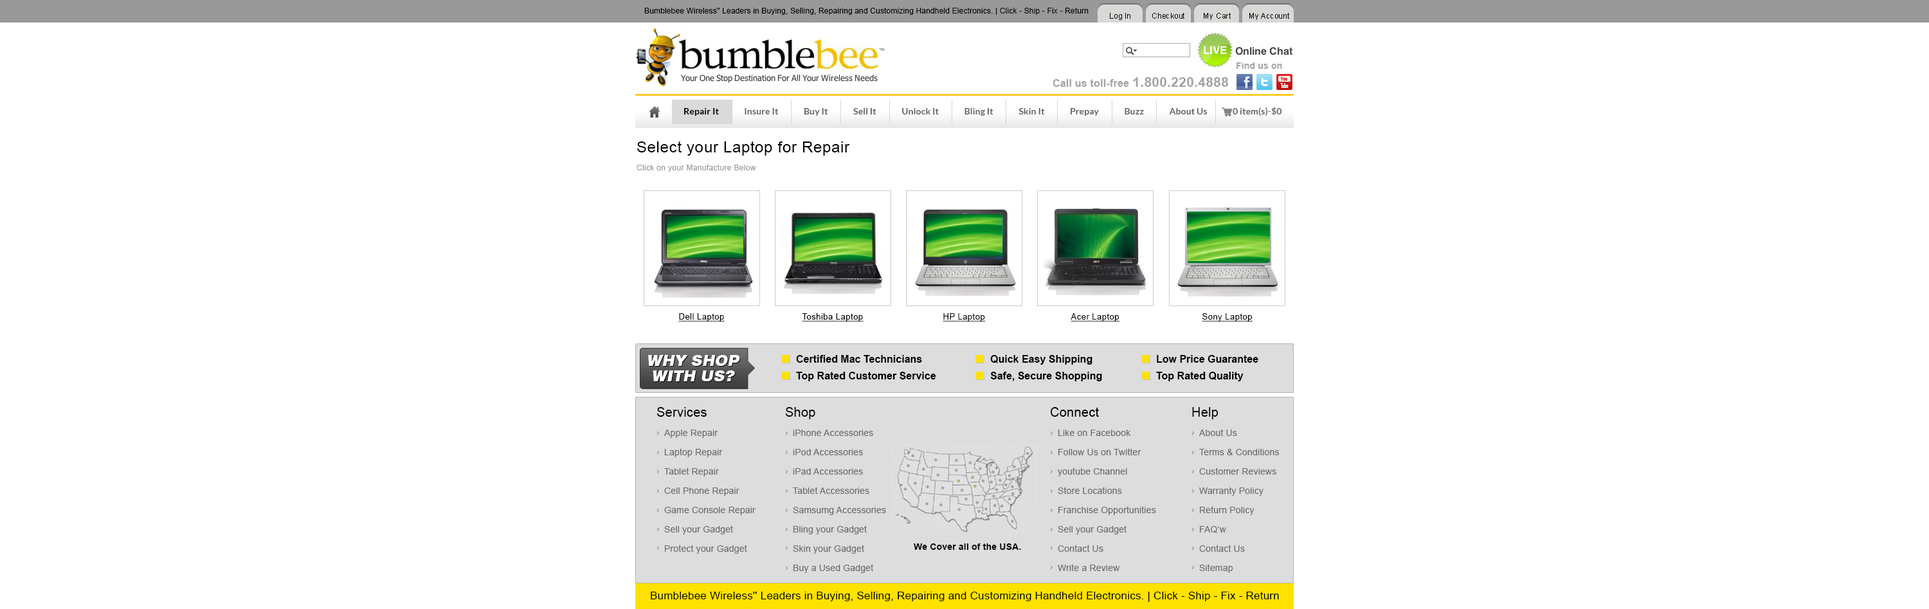
<style>
.page{position:relative;width:1929px;height:609px;background:#ffffff}
.page>*{position:absolute;margin:0}
.t1{font:7.7px "ArialMT";letter-spacing:0.013em;color:#000000}
.t2{font:9px "Arial-BoldMT";letter-spacing:0.013em;color:#a3a3a3}
.t3{font:10.3px "Arial-BoldMT";letter-spacing:0.013em;color:#a3a3a3}
.t4{font:13.5px "Arial-BoldMT";letter-spacing:0.013em;color:#a3a3a3}
.t5{font:9px "Lato-Bold";letter-spacing:0.008em;color:#666666}
.t6{font:9px "Lato-Bold";letter-spacing:0.008em;color:#000000}
.t7{font:15.4px "ArialMT";letter-spacing:0.028em;color:#000000}
.t8{font:7.7px "ArialMT";letter-spacing:0.028em;color:#999999}
.t9{font:8.4px "ArialMT";letter-spacing:0.038em;color:#000000;text-decoration:underline}
.t10{font:8.4px "ArialMT";letter-spacing:0.038em;color:#010101;text-decoration:underline}
.t11{font:15.4px/15.4px "Swiss721BT-Black";color:#ffffff;font-style:italic}
.t12{font:10.3px/16.7px "Arial-BoldMT";color:#000000}
.t13{font:12.9px "ArialMT";letter-spacing:0.013em;color:#000000}
.t14{font:9px/19.3px "ArialMT";letter-spacing:0.013em;color:#6b6b6b}
.t15{font:9px "Arial-BoldMT";letter-spacing:0.013em;color:#000000}
.t16{font:10.9px "ArialMT";letter-spacing:0.013em;color:#000000}
</style>
<div class="page">
<p class="t1" style="left:644px;top:8px;width:444px;height:7px">Bumblebee Wireless'' Leaders in Buying, Selling, Repairing and Customizing Handheld Electronics. | Click - Ship - Fix - Return</p>
<p class="t1" style="left:1110px;top:13px;width:20px;height:7px">Log In</p>
<p class="t1" style="left:1152px;top:13px;width:32px;height:6px">Checkout</p>
<p class="t1" style="left:1203px;top:13px;width:27px;height:7px">My Cart</p>
<p class="t1" style="left:1249px;top:13px;width:40px;height:7px">My Account</p>
<p class="t2" style="left:1236px;top:62px;width:46px;height:7px">Find us on</p>
<p class="t3" style="left:1052px;top:77px;width:176px;height:10px">Call us toll-free <span class="t4">1.800.220.4888</span></p>
<p class="t5" style="left:684px;top:107px;width:598px;height:9px"><span class="t6">Repair It </span>             Insure It              Buy It              Sell It              Unlock It              Bling It              Skin It              Prepay              Buzz              About Us              0 item(s)-$0</p>
<p class="t7" style="left:637px;top:141px;width:213px;height:15px">Select your Laptop for Repair</p>
<p class="t8" style="left:636px;top:165px;width:120px;height:7px">Click on your Manufacture Below</p>
<p class="t9" style="left:678px;top:313px;width:46px;height:8px">Dell Laptop</p>
<p class="t9" style="left:802px;top:313px;width:61px;height:8px">Toshiba Laptop</p>
<p class="t9" style="left:942px;top:313px;width:44px;height:8px">HP Laptop</p>
<p class="t10" style="left:1070px;top:313px;width:50px;height:8px">Acer Laptop</p>
<p class="t9" style="left:1202px;top:313px;width:50px;height:8px">Sony Laptop</p>
<p class="t11" style="left:648px;top:355px;width:92px;height:26px;text-align:center">WHY SHOP<br>WITH US?</p>
<p class="t12" style="left:796px;top:355px;width:140px;height:26px">Certified Mac Technicians   <br>Top Rated Customer Service</p>
<p class="t12" style="left:990px;top:355px;width:112px;height:26px">Quick Easy Shipping    <br>Safe, Secure Shopping</p>
<p class="t12" style="left:1156px;top:355px;width:102px;height:26px">Low Price Guarantee    <br>Top Rated Quality</p>
<p class="t13" style="left:656px;top:407px;width:50px;height:10px">Services</p>
<p class="t13" style="left:785px;top:407px;width:30px;height:12px">Shop</p>
<p class="t13" style="left:1050px;top:407px;width:49px;height:10px">Connect</p>
<p class="t13" style="left:1192px;top:407px;width:26px;height:12px">Help</p>
<p class="t14" style="left:664px;top:429px;width:91px;height:125px">Apple Repair<br>Laptop Repair<br>Tablet Repair<br>Cell Phone Repair<br>Game Console Repair<br>Sell your Gadget<br>Protect your Gadget</p>
<p class="t14" style="left:793px;top:429px;width:93px;height:144px">iPhone Accessories<br>iPod Accessories<br>iPad Accessories<br>Tablet Accessories<br>Samsumg Accessories<br>Bling your Gadget<br>Skin your Gadget<br>Buy a Used Gadget</p>
<p class="t14" style="left:1057px;top:429px;width:99px;height:142px">Like on Facebook<br>Follow Us on Twitter<br>youtube Channel<br>Store Locations<br>Franchise Opportunities<br>Sell your Gadget<br>Contact Us<br>Write a Review</p>
<p class="t14" style="left:1199px;top:429px;width:80px;height:144px">About Us<br>Terms &amp; Conditions<br>Customer Reviews<br>Warranty Policy<br>Return Policy<br>FAQ’w<br>Contact Us<br>Sitemap</p>
<p class="t15" style="left:914px;top:543px;width:107px;height:7px">We Cover all of the USA.</p>
<p class="t16" style="left:651px;top:591px;width:628px;height:11px">Bumblebee Wireless'' Leaders in Buying, Selling, Repairing and Customizing Handheld Electronics. | Click - Ship - Fix - Return</p>
</div>
